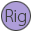
<style>
.page{position:relative;width:32px;height:32px;background:#ae9dd9}
.page>*{position:absolute;margin:0}
.t1{font:18px "MyriadPro-Light";color:#3f3f40}
</style>
<div class="page">
<p class="t1" style="left:5px;top:9px;width:21px;height:17px">Rig</p>
</div>
